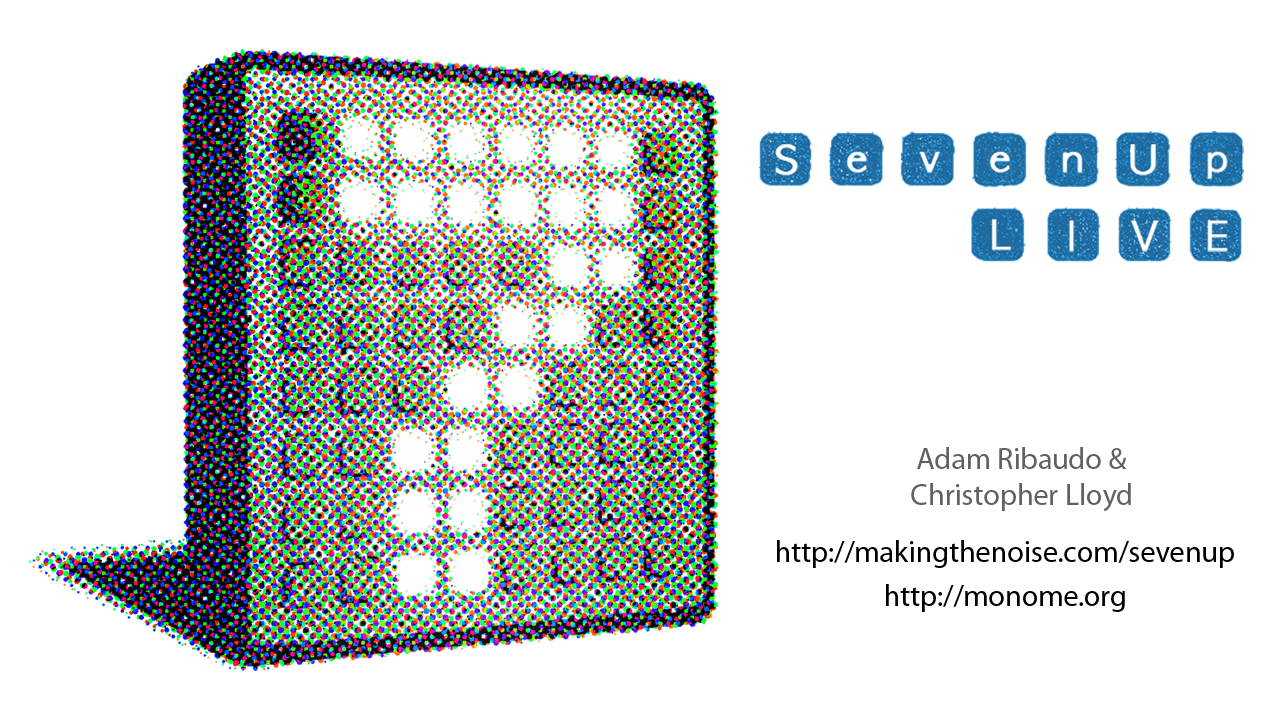
<style>
.page{position:relative;width:1280px;height:720px;background:#ffffff}
.page>*{position:absolute;margin:0}
.t1{font:30px "MyriadPro-Regular";color:#616161}
.t2{font:30px "MyriadPro-Regular";color:#000000}
</style>
<div class="page">
<p class="t1" style="left:911px;top:447px;width:220px;height:65px;text-align:right">Adam Ribaudo &amp; <br>Christopher Lloyd</p>
<p class="t2" style="left:777px;top:540px;width:457px;height:28px">http://makingthenoise.com/sevenup</p>
<p class="t2" style="left:886px;top:584px;width:239px;height:28px">http://monome.org</p>
</div>
